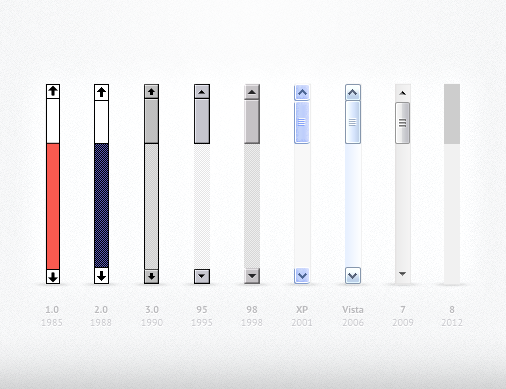
<style>
.page{position:relative;width:506px;height:389px}
.page>*{position:absolute;margin:0}
.t1{font:10px/8px "PTSans-Regular";color:#c3c3c8}
.t2{font:10px/8px "PTSans-Bold";color:#b9b9bc}
</style>
<div class="page">
<p class="t1" style="left:41px;top:306px;width:21px;height:20px;text-align:center"><span class="t2">1.0<br></span>1985</p>
<p class="t1" style="left:90px;top:306px;width:22px;height:20px;text-align:center"><span class="t2">2.0<br></span>1988</p>
<p class="t1" style="left:141px;top:306px;width:22px;height:20px;text-align:center"><span class="t2">3.0<br></span>1990</p>
<p class="t1" style="left:191px;top:306px;width:21px;height:20px;text-align:center"><span class="t2">95<br></span>1995</p>
<p class="t1" style="left:241px;top:306px;width:22px;height:20px;text-align:center"><span class="t2">98<br></span>1998</p>
<p class="t1" style="left:291px;top:306px;width:21px;height:20px;text-align:center"><span class="t2">XP<br></span>2001</p>
<p class="t2" style="left:342px;top:306px;width:22px;height:20px;text-align:center">Vista<br><span class="t1">2006</span></p>
<p class="t1" style="left:392px;top:306px;width:22px;height:20px;text-align:center"><span class="t2">7<br></span>2009</p>
<p class="t1" style="left:441px;top:306px;width:22px;height:20px;text-align:center"><span class="t2">8<br></span>2012</p>
</div>
